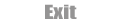
<style>
.page{position:relative;width:128px;height:24px;background:#ffffff}
.page>*{position:absolute;margin:0}
.t1{font:18px "Impact";color:#959494;scale:1.25 1}
</style>
<div class="page">
<p class="t1" style="left:45px;top:4px;width:32px;height:15px">Exit</p>
</div>
